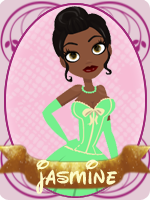
<style>
.page{position:relative;width:150px;height:200px}
.page>*{position:absolute;margin:0}
.t1{font:37.4px "Waltograph";color:#fcfac7}
</style>
<div class="page">
<p class="t1" style="left:36px;top:159px;width:82px;height:35px">jasmine</p>
</div>
